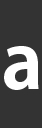
<style>
.page{position:relative;width:42px;height:128px;background:#333333}
.page>*{position:absolute;margin:0}
.t1{font:75px "AdobeGothicStd-Bold";color:#ffffff}
</style>
<div class="page">
<p class="t1" style="left:4px;top:46px;width:35px;height:44px">a</p>
</div>
